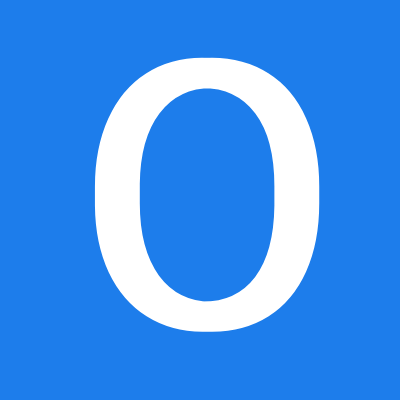
<style>
.page{position:relative;width:400px;height:400px;background:#1d7deb}
.page>*{position:absolute;margin:0}
.t1{font:375px "Roboto-Regular";color:#ffffff;font-weight:bold}
</style>
<div class="page">
<p class="t1" style="left:94px;top:57px;width:226px;height:275px">O</p>
</div>
